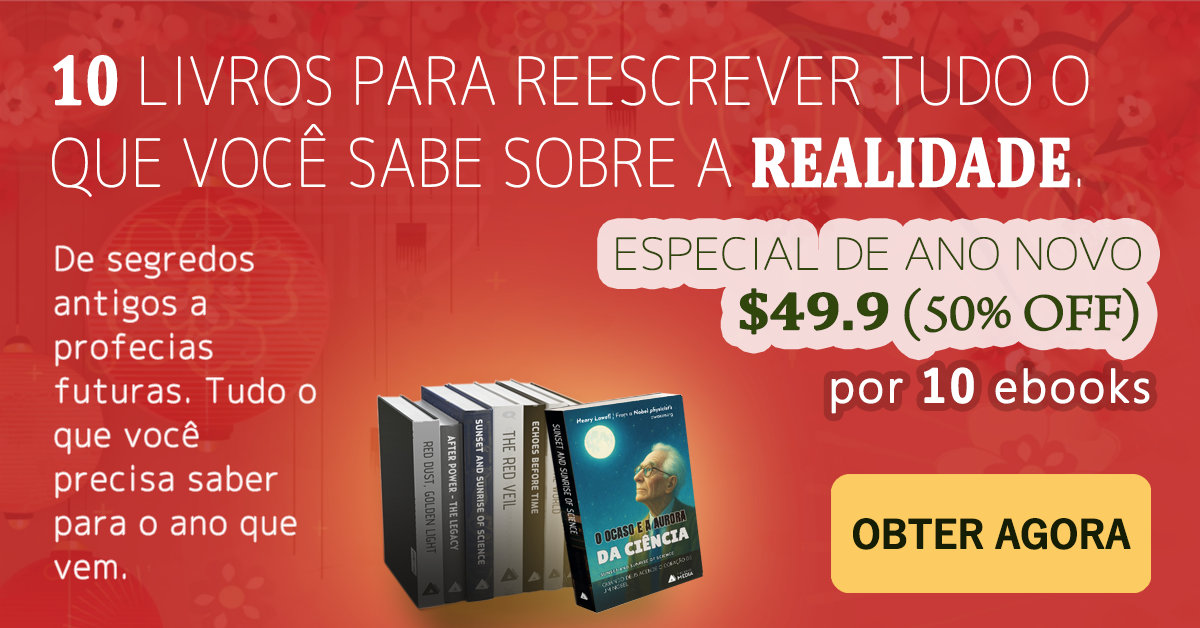
<style>
.page{position:relative;width:1200px;height:628px}
.page>*{position:absolute;margin:0}
.t1{font:65px/82px "Chogokuboso-Gothic";color:#ffffff;font-weight:bold;scale:0.88 1}
.t2{font:71.5px/82px "Cambria-Bold";color:#ffffff;font-weight:bold;scale:0.8 1}
.t3{font:32.4px/44px "Chogokuboso-Gothic";letter-spacing:0.05em;color:#ffffff;font-weight:bold}
.t4{font:43.2px/60px "Chogokuboso-Gothic";letter-spacing:-0.025em;color:#31460c;font-weight:bold;scale:1.11 1}
.t5{font:54px/60px "Cambria-Bold";letter-spacing:-0.025em;color:#31460c;font-weight:bold;scale:1.11 1}
.t6{font:54px/60px "ArnoPro-LightDisplay";letter-spacing:-0.025em;color:#31460c;font-weight:bold;scale:1.11 1}
.t7{font:44px "MalgunGothic-Semilight";letter-spacing:0.05em;color:#ffffff;font-weight:bold}
.t8{font:44px "YuGothic-Bold";letter-spacing:0.05em;color:#ffffff;font-weight:bold}
.t9{font:37.8px "YuGothic-Bold";letter-spacing:-0.025em;color:#151e05;font-weight:bold}
</style>
<div class="page">
<p class="t1" style="left:52px;top:55px;width:1037px;height:142px"><span class="t2">10</span> LIVROS PARA REESCREVER TUDO O QUE VOCÊ SABE SOBRE A <span class="t2">REALIDADE</span>.</p>
<p class="t3" style="left:55px;top:245px;width:261px;height:334px">De segredos antigos a profecias futuras. Tudo o que você precisa saber para o ano que vem.</p>
<p class="t4" style="left:616px;top:237px;width:525px;height:105px;text-align:right">ESPECIAL DE ANO NOVO<br><span class="t5">$49.9</span><span class="t6"> (50% OFF)</span></p>
<p class="t7" style="left:831px;top:367px;width:319px;height:47px">por <span class="t8">10</span> ebooks</p>
<p class="t9" style="left:853px;top:518px;width:278px;height:32px">OBTER AGORA</p>
</div>
